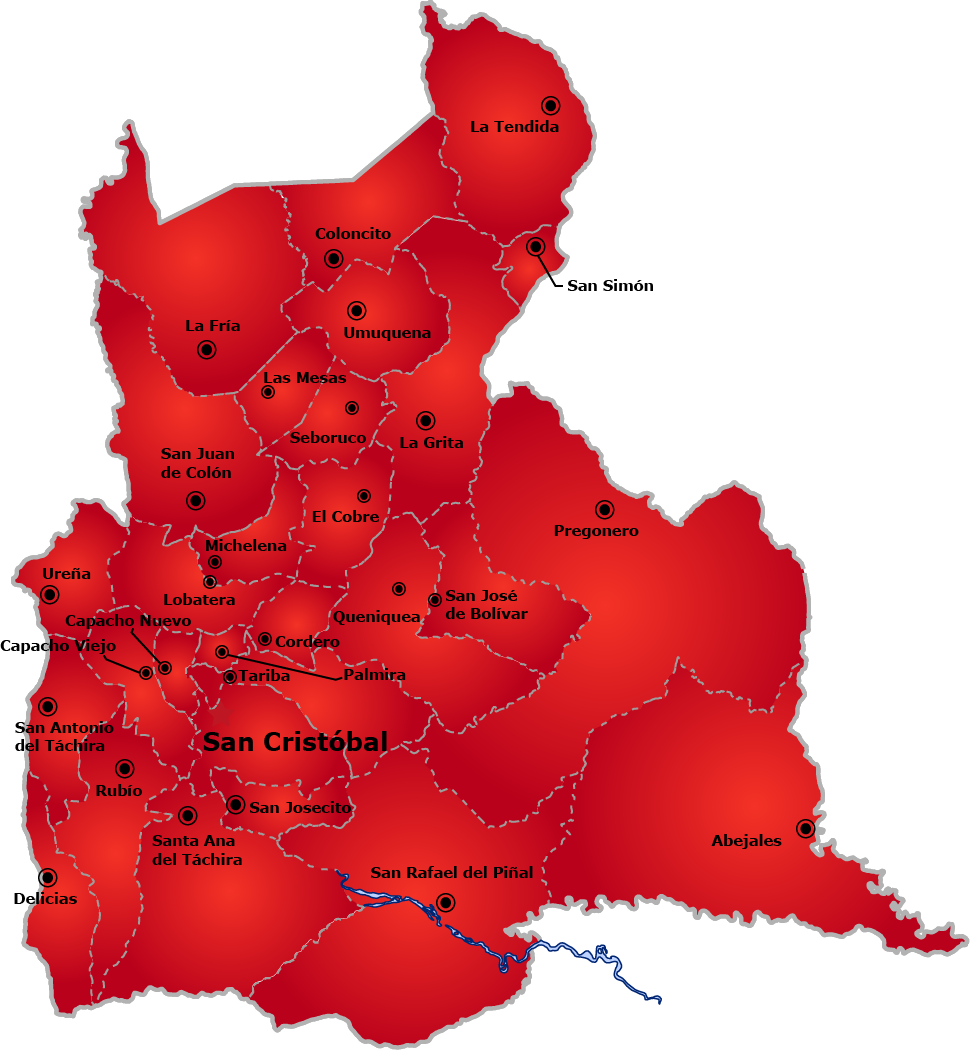
<style>
.page{position:relative;width:971px;height:1050px;background:#ffffff}
.page>*{position:absolute;margin:0}
.t1{font:14.6px "Verdana-Bold";color:#000000}
.t2{font:14.6px/18.7px "Verdana-Bold";color:#000000}
.t3{font:25px "Verdana-Bold";color:#000000}
</style>
<div class="page">
<p class="t1" style="left:471px;top:120px;width:88px;height:12px">La Tendida</p>
<p class="t1" style="left:315px;top:227px;width:76px;height:12px">Coloncito</p>
<p class="t1" style="left:568px;top:279px;width:85px;height:12px">San Simón</p>
<p class="t1" style="left:186px;top:320px;width:54px;height:11px">La Fría</p>
<p class="t1" style="left:344px;top:327px;width:87px;height:14px">Umuquena</p>
<p class="t1" style="left:264px;top:372px;width:83px;height:11px">Las Mesas</p>
<p class="t1" style="left:290px;top:431px;width:76px;height:12px">Seboruco</p>
<p class="t1" style="left:400px;top:436px;width:63px;height:12px">La Grita</p>
<p class="t2" style="left:161px;top:448px;width:73px;height:30px">San Juan <br>de Colón</p>
<p class="t1" style="left:312px;top:510px;width:67px;height:12px">El Cobre</p>
<p class="t1" style="left:554px;top:525px;width:85px;height:14px">Pregonero</p>
<p class="t1" style="left:206px;top:539px;width:81px;height:12px">Michelena</p>
<p class="t1" style="left:43px;top:568px;width:48px;height:11px">Ureña</p>
<p class="t1" style="left:164px;top:593px;width:71px;height:12px">Lobatera</p>
<p class="t2" style="left:445px;top:590px;width:83px;height:29px">San José <br>de Bolívar</p>
<p class="t1" style="left:65px;top:614px;width:126px;height:15px">Capacho Nuevo</p>
<p class="t1" style="left:333px;top:610px;width:87px;height:15px">Queniquea</p>
<p class="t1" style="left:0px;top:639px;width:116px;height:15px">Capacho Viejo</p>
<p class="t1" style="left:275px;top:635px;width:65px;height:12px">Cordero</p>
<p class="t1" style="left:238px;top:669px;width:52px;height:12px">Tariba</p>
<p class="t1" style="left:344px;top:668px;width:62px;height:12px">Palmira</p>
<p class="t2" style="left:15px;top:721px;width:99px;height:30px">San Antonio<br>del Táchira</p>
<p class="t3" style="left:203px;top:730px;width:184px;height:21px">San Cristóbal</p>
<p class="t1" style="left:96px;top:784px;width:46px;height:12px">Rubío</p>
<p class="t1" style="left:250px;top:801px;width:101px;height:12px">San Josecito</p>
<p class="t2" style="left:152px;top:835px;width:90px;height:30px">Santa Ana<br>del Táchira</p>
<p class="t1" style="left:711px;top:834px;width:71px;height:15px">Abejales</p>
<p class="t1" style="left:371px;top:866px;width:162px;height:12px">San Rafael del Piñal</p>
<p class="t1" style="left:14px;top:892px;width:63px;height:12px">Delicias</p>
</div>
